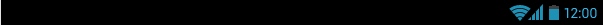
<style>
.page{position:relative;width:603px;height:25px;background:#000000}
.page>*{position:absolute;margin:0}
.t1{font:14px "Roboto-Regular";color:#33b5e5}
</style>
<div class="page">
<p class="t1" style="left:564px;top:8px;width:33px;height:10px">12:00</p>
</div>
